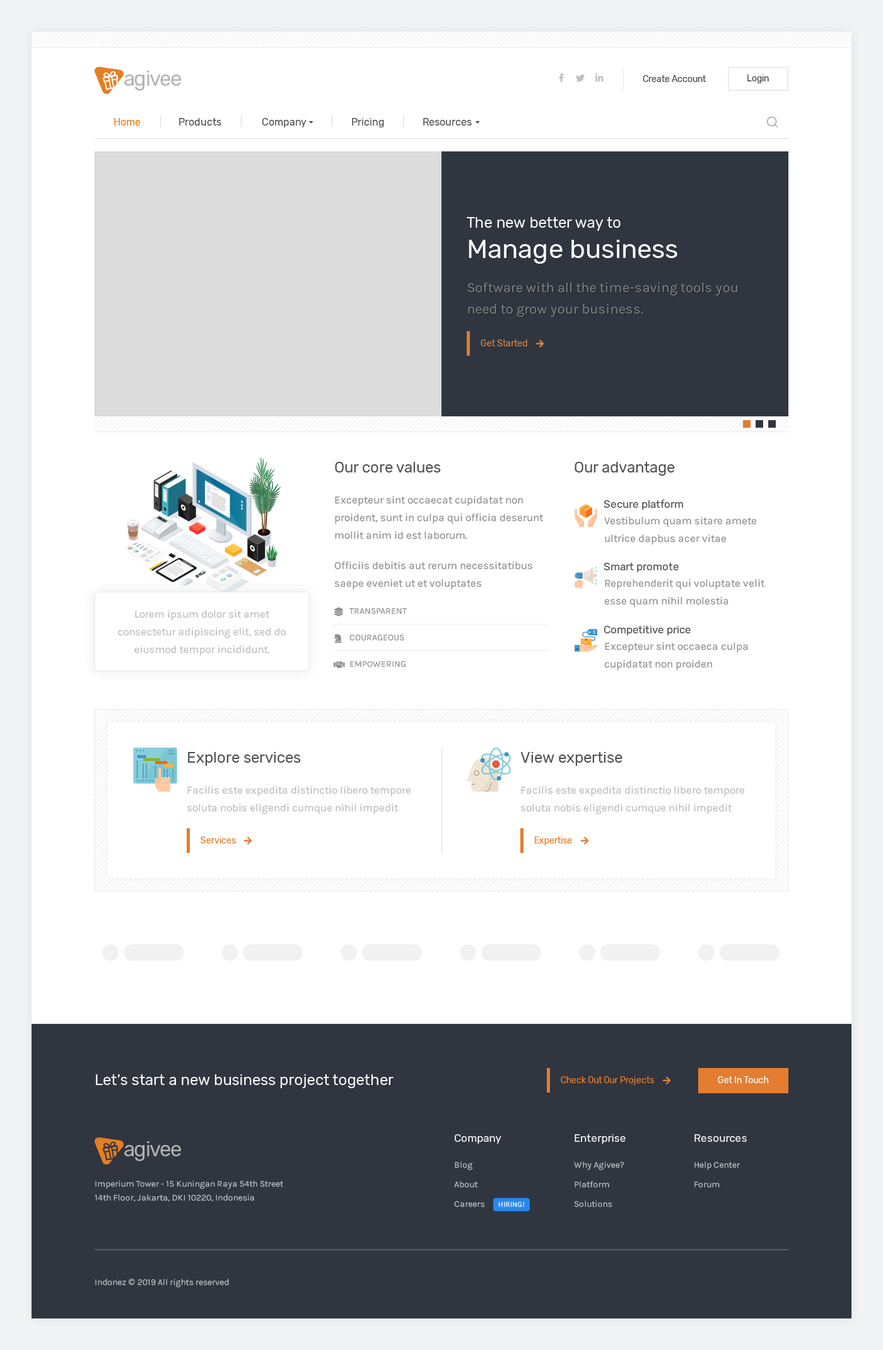
<style>
.page{position:relative;width:883px;height:1350px;background:#ffffff}
.page>*{position:absolute;margin:0}
.t1{font:20.8px "Rubik-Regular";letter-spacing:-0.05em;color:#b3b3b3}
.t2{font:8.8px "Rubik-Regular";color:#4f4f4f}
.t3{font:10.1px "Rubik-Regular";color:#4f4f4f}
.t4{font:10.1px "Rubik-Regular";color:#e67e22}
.t5{font:15.1px "Rubik-Regular";letter-spacing:0.005em;color:#ffffff}
.t6{font:26.5px "Rubik-Regular";letter-spacing:0.005em;color:#ffffff}
.t7{font:13.9px/21.4px "Karla-Regular";letter-spacing:0.005em;color:#808080}
.t8{font:8.8px "Rubik-Regular";letter-spacing:0.005em;color:#e47d2f}
.t9{font:15.1px "Rubik-Regular";color:#4f4f4f}
.t10{font:10.7px/17.7px "Karla-Regular";color:#8f8f8f}
.t11{font:10.7px "Rubik-Regular";color:#4f4f4f}
.t12{font:10.7px/17.7px "Karla-Regular";color:#bcbcbc}
.t13{font:8.8px/26.5px "Karla-Regular";color:#8f8f8f;text-transform:uppercase}
.t14{font:8.8px "Rubik-Regular";letter-spacing:0.005em;color:#ffffff}
.t15{font:10.7px "Rubik-Regular";letter-spacing:0.005em;color:#ffffff}
.t16{font:8.8px/19.6px "Karla-Regular";letter-spacing:0.005em;color:#c1c3c6}
.t17{font:8.8px/13.9px "Karla-Regular";letter-spacing:0.005em;color:#c1c3c6}
.t18{font:7.6px "Karla-Regular";letter-spacing:0.025em;color:#ffffff;text-transform:uppercase}
.t19{font:8.8px "Karla-Regular";letter-spacing:0.005em;color:#c1c3c6}
.t20{font:8.8px "TimesNewRomanPSMT";letter-spacing:0.005em;color:#c1c3c6}
</style>
<div class="page">
<p class="t1" style="left:124px;top:71px;width:57px;height:20px">agivee</p>
<p class="t2" style="left:643px;top:75px;width:64px;height:7px">Create Account</p>
<p class="t2" style="left:748px;top:74px;width:21px;height:9px">Login</p>
<p class="t3" style="left:114px;top:118px;width:358px;height:9px"><span class="t4">Home</span>               Products                Company                  Pricing               Resources</p>
<p class="t5" style="left:467px;top:217px;width:154px;height:14px">The new better way to</p>
<p class="t6" style="left:469px;top:240px;width:209px;height:24px">Manage business</p>
<p class="t7" style="left:467px;top:282px;width:270px;height:35px">Software with all the time-saving tools you need to grow your business.</p>
<p class="t8" style="left:481px;top:339px;width:46px;height:7px">Get Started</p>
<p class="t9" style="left:335px;top:462px;width:106px;height:11px">Our core values</p>
<p class="t9" style="left:575px;top:462px;width:100px;height:14px">Our advantage</p>
<p class="t10" style="left:335px;top:496px;width:209px;height:43px">Excepteur sint occaecat cupidatat non proident, sunt in culpa qui officia deserunt mollit anim id est laborum.</p>
<p class="t11" style="left:604px;top:500px;width:79px;height:10px">Secure platform</p>
<p class="t10" style="left:604px;top:517px;width:152px;height:28px">Vestibulum quam sitare amete ultrice dapbus acer vitae</p>
<p class="t10" style="left:334px;top:561px;width:199px;height:29px">Officiis debitis aut rerum necessitatibus saepe eveniet ut et voluptates</p>
<p class="t11" style="left:604px;top:563px;width:75px;height:9px">Smart promote</p>
<p class="t10" style="left:604px;top:579px;width:161px;height:29px">Reprehenderit qui voluptate velit esse quam nihil molestia</p>
<p class="t12" style="left:118px;top:610px;width:168px;height:46px;text-align:center">Lorem ipsum dolor sit amet <br>consectetur adipiscing elit, sed do eiusmod tempor incididunt.</p>
<p class="t13" style="left:349px;top:608px;width:59px;height:59px">Transparent<br>Courageous<br>Empowering</p>
<p class="t11" style="left:604px;top:626px;width:87px;height:9px">Competitive price</p>
<p class="t10" style="left:604px;top:642px;width:144px;height:29px">Excepteur sint occaeca culpa cupidatat non proiden</p>
<p class="t9" style="left:188px;top:752px;width:113px;height:14px">Explore services</p>
<p class="t9" style="left:520px;top:752px;width:103px;height:14px">View expertise</p>
<p class="t12" style="left:187px;top:786px;width:224px;height:28px">Facilis este expedita distinctio libero tempore soluta nobis eligendi cumque nihil impedit</p>
<p class="t12" style="left:520px;top:786px;width:224px;height:28px">Facilis este expedita distinctio libero tempore soluta nobis eligendi cumque nihil impedit</p>
<p class="t8" style="left:201px;top:837px;width:35px;height:6px">Services</p>
<p class="t8" style="left:534px;top:837px;width:38px;height:8px">Expertise</p>
<p class="t5" style="left:96px;top:1074px;width:298px;height:14px">Let’s start a new business project together</p>
<p class="t8" style="left:561px;top:1076px;width:93px;height:9px">Check Out Our Projects</p>
<p class="t14" style="left:718px;top:1076px;width:51px;height:7px">Get In Touch</p>
<p class="t1" style="left:124px;top:1141px;width:57px;height:20px">agivee</p>
<p class="t15" style="left:454px;top:1134px;width:48px;height:10px">Company</p>
<p class="t15" style="left:575px;top:1134px;width:51px;height:10px">Enterprise</p>
<p class="t15" style="left:695px;top:1134px;width:52px;height:8px">Resources</p>
<p class="t16" style="left:454px;top:1161px;width:31px;height:47px">Blog<br>About<br>Careers</p>
<p class="t16" style="left:574px;top:1161px;width:51px;height:47px">Why Agivee?<br>Platform<br>Solutions</p>
<p class="t16" style="left:695px;top:1161px;width:45px;height:27px">Help Center<br>Forum</p>
<p class="t17" style="left:95px;top:1180px;width:188px;height:22px">Imperium Tower - 15 Kuningan Raya 54th Street<br>14th Floor, Jakarta, DKI 10220, Indonesia</p>
<p class="t18" style="left:498px;top:1202px;width:27px;height:6px">hiring!</p>
<p class="t19" style="left:95px;top:1279px;width:134px;height:9px">Indonez <span class="t20">©</span> 2019 All rights reserved</p>
</div>
